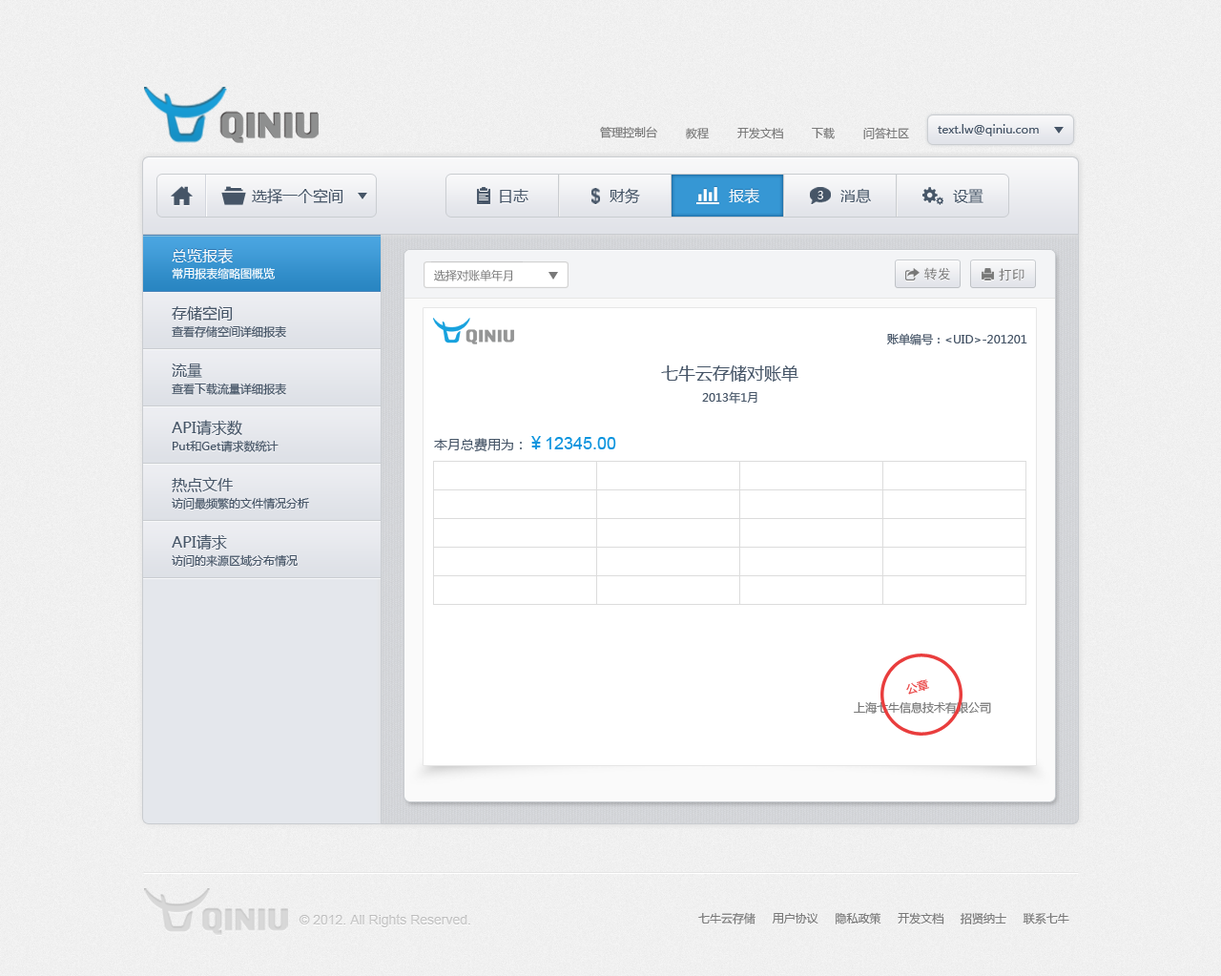
<style>
.page{position:relative;width:1221px;height:976px;background:#ffffff}
.page>*{position:absolute;margin:0}
.t1{font:11.5px "MicrosoftYaHei";color:#787878}
.t2{font:11.5px "MicrosoftYaHei";color:#465567}
.t3{font:15.3px "MicrosoftYaHei";color:#465567}
.t4{font:15.3px "MicrosoftYaHei";color:#ffffff}
.t5{font:11.5px "MicrosoftYaHei";color:#f8f8f9}
.t6{font:11.5px "MicrosoftYaHei";color:#ffffff}
.t7{font:13.4px "SimHei";color:#787878}
.t8{font:17.2px "MicrosoftYaHei";color:#465567}
.t9{font:17.2px "ArialMT";color:#0c94de}
.t10{font:13.4px "MicrosoftYaHei";color:#465567}
.t11{font:17.2px "MicrosoftYaHei";color:#0c94de}
.t12{font:11.5px "MicrosoftYaHei";color:#e93d3d}
.t13{font:13.4px "ArialMT";color:#c6c6c6}
</style>
<div class="page">
<p class="t1" style="left:600px;top:126px;width:57px;height:12px">管理控制台</p>
<p class="t2" style="left:938px;top:124px;width:101px;height:12px">text.lw@qiniu.com</p>
<p class="t1" style="left:686px;top:128px;width:24px;height:11px">教程</p>
<p class="t1" style="left:738px;top:127px;width:45px;height:12px">开发文档</p>
<p class="t1" style="left:812px;top:127px;width:23px;height:12px">下载</p>
<p class="t1" style="left:864px;top:127px;width:45px;height:12px">问答社区</p>
<p class="t3" style="left:252px;top:188px;width:92px;height:16px">选择一个空间</p>
<p class="t3" style="left:500px;top:189px;width:29px;height:14px">日志</p>
<p class="t3" style="left:610px;top:188px;width:30px;height:16px">财务</p>
<p class="t4" style="left:729px;top:188px;width:31px;height:16px">报表</p>
<p class="t5" style="left:818px;top:191px;width:6px;height:8px">3</p>
<p class="t3" style="left:841px;top:188px;width:30px;height:15px">消息</p>
<p class="t3" style="left:953px;top:189px;width:31px;height:14px">设置</p>
<p class="t4" style="left:172px;top:248px;width:61px;height:16px">总览报表</p>
<p class="t6" style="left:172px;top:267px;width:104px;height:13px">常用报表缩略图概览</p>
<p class="t1" style="left:434px;top:269px;width:78px;height:13px">选择对账单年月</p>
<p class="t7" style="left:925px;top:267px;width:25px;height:14px">转发</p>
<p class="t7" style="left:999px;top:268px;width:26px;height:14px">打印</p>
<p class="t3" style="left:172px;top:305px;width:61px;height:16px">存储空间</p>
<p class="t2" style="left:172px;top:325px;width:114px;height:13px">查看存储空间详细报表</p>
<p class="t2" style="left:887px;top:333px;width:141px;height:12px">账单编号：&lt;UID&gt;-201201</p>
<p class="t3" style="left:172px;top:364px;width:30px;height:14px">流量</p>
<p class="t8" style="left:661px;top:365px;width:138px;height:17px">七牛云存储对账单</p>
<p class="t2" style="left:172px;top:383px;width:114px;height:12px">查看下载流量详细报表</p>
<p class="t2" style="left:702px;top:391px;width:56px;height:13px">2013年1月</p>
<p class="t3" style="left:172px;top:420px;width:70px;height:16px">API请求数</p>
<p class="t9" style="left:434px;top:436px;width:182px;height:16px"><span class="t10">本月总费用为：</span><span class="t11">￥</span>12345.00</p>
<p class="t2" style="left:173px;top:440px;width:106px;height:12px">Put和Get请求数统计</p>
<p class="t3" style="left:172px;top:477px;width:61px;height:15px">热点文件</p>
<p class="t2" style="left:172px;top:497px;width:137px;height:13px">访问最频繁的文件情况分析</p>
<p class="t3" style="left:172px;top:534px;width:55px;height:16px">API请求</p>
<p class="t2" style="left:172px;top:554px;width:126px;height:13px">访问的来源区域分布情况</p>
<p class="t12" style="left:907px;top:679px;width:22px;height:16px;rotate:-15deg">公章</p>
<p class="t1" style="left:854px;top:701px;width:137px;height:13px">上海七牛信息技术有限公司</p>
<p class="t13" style="left:299px;top:914px;width:171px;height:14px">© 2012. All Rights Reserved.</p>
<p class="t1" style="left:699px;top:912px;width:371px;height:13px">七牛云存储     用户协议     隐私政策     开发文档     招贤纳士     联系七牛</p>
</div>
